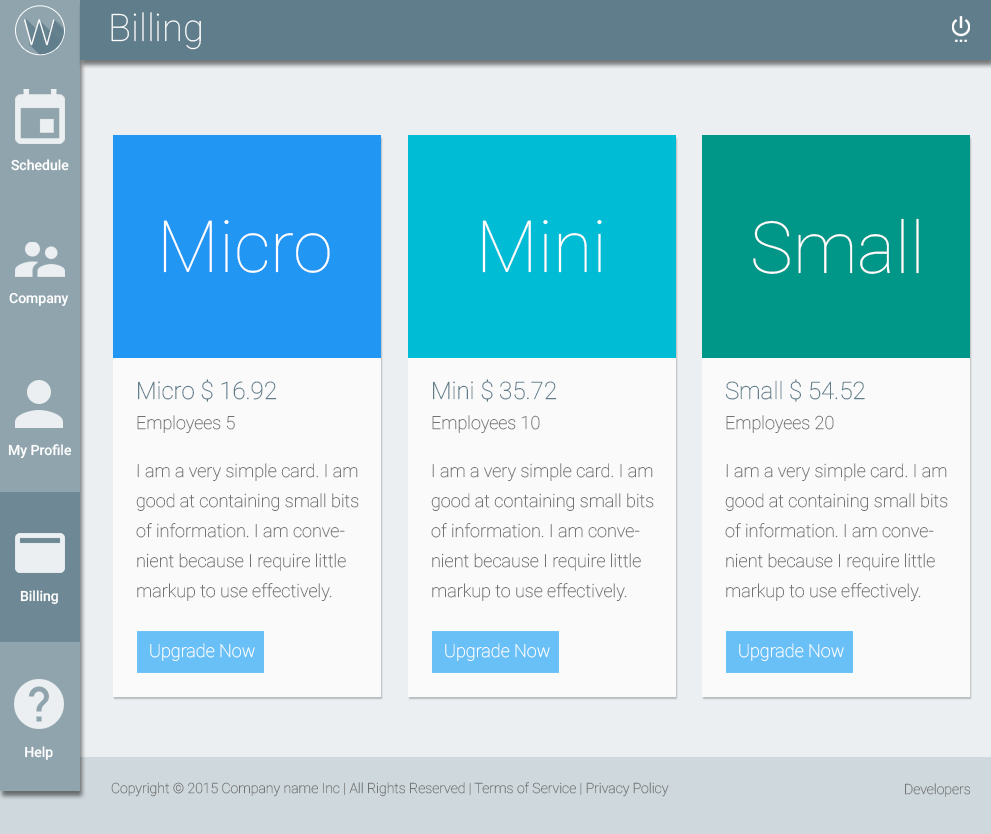
<style>
.page{position:relative;width:991px;height:834px;background:#fafafa}
.page>*{position:absolute;margin:0}
.t1{font:38px "Roboto-Thin";color:#ffffff}
.t2{font:35.7px "Roboto-Thin";color:#ffffff}
.t3{font:14px "Roboto-Medium";color:#ffffff}
.t4{font:72px "Roboto-Thin";color:#ffffff}
.t5{font:18px/30px "Roboto-Thin";color:#727272}
.t6{font:24px "Roboto-Thin";color:#607d8b}
.t7{font:18px/48px "Roboto-Thin";color:#727272}
.t8{font:18px/36px "Roboto-Thin";color:#ffffff}
.t9{font:14px "Roboto-Thin";color:#727272}
</style>
<div class="page">
<p class="t1" style="left:111px;top:12px;width:90px;height:38px">Billing</p>
<p class="t2" style="left:24px;top:19px;width:31px;height:27px">W</p>
<p class="t3" style="left:11px;top:159px;width:58px;height:12px">Schedule</p>
<p class="t4" style="left:163px;top:220px;width:167px;height:53px">Micro</p>
<p class="t4" style="left:482px;top:220px;width:120px;height:53px">Mini</p>
<p class="t4" style="left:753px;top:218px;width:166px;height:56px">Small</p>
<p class="t3" style="left:9px;top:292px;width:60px;height:14px">Company</p>
<p class="t5" style="left:136px;top:379px;width:223px;height:282px"><span class="t6">Micro $ 16.92<br></span>Employees 5<br><span class="t7">I am a very simple card. I am </span>good at containing small bits of information. I am convenient because I require little markup to use effectively.<br><br>   <span class="t8">Upgrade Now</span></p>
<p class="t5" style="left:431px;top:379px;width:223px;height:282px"><span class="t6">Mini $ 35.72<br></span>Employees 10<br><span class="t7">I am a very simple card. I am </span>good at containing small bits of information. I am convenient because I require little markup to use effectively.<br><br>   <span class="t8">Upgrade Now</span></p>
<p class="t5" style="left:725px;top:379px;width:223px;height:282px"><span class="t6">Small $ 54.52<br></span>Employees 20<br><span class="t7">I am a very simple card. I am </span>good at containing small bits of information. I am convenient because I require little markup to use effectively.<br><br>   <span class="t8">Upgrade Now</span></p>
<p class="t3" style="left:8px;top:444px;width:64px;height:15px">My Profile</p>
<p class="t3" style="left:20px;top:590px;width:38px;height:15px">Billing</p>
<p class="t3" style="left:25px;top:746px;width:28px;height:14px">Help</p>
<p class="t9" style="left:111px;top:782px;width:558px;height:15px">Copyright © 2015 Company name Inc | All Rights Reserved | Terms of Service | Privacy Policy</p>
<p class="t9" style="left:905px;top:783px;width:65px;height:14px">Developers</p>
</div>
